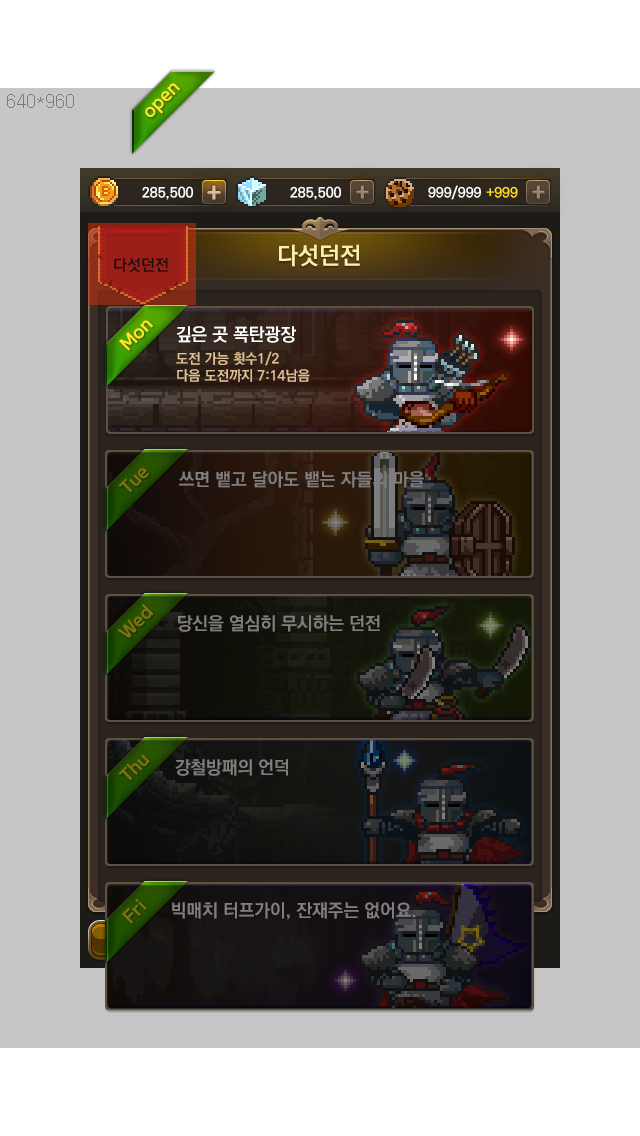
<style>
.page{position:relative;width:640px;height:1136px;background:#c6c6c6}
.page>*{position:absolute;margin:0}
.t1{font:18px "GodoM";letter-spacing:0.025em;color:#ffe326}
.t2{font:24px "KoPubDotumBold";color:#ffedab}
.t3{font:16px "KoPubDotumBold";color:#1b0e0f}
.t4{font:18px "KoPubDotumBold";color:#ffffff}
.t5{font:14px "KoPubDotumBold";color:#e1c093}
.t6{font:18px "GodoM";letter-spacing:0.025em;color:#7f7113}
.t7{font:18px "KoPubDotumBold";color:#7f7f7f}
</style>
<div class="page">
<p class="t1" style="left:145px;top:83px;width:35px;height:34px;rotate:-45deg">open</p>
<p class="t2" style="left:279px;top:244px;width:81px;height:23px">다섯던전</p>
<p class="t3" style="left:114px;top:257px;width:54px;height:16px">다섯던전</p>
<p class="t1" style="left:119px;top:320px;width:34px;height:31px;rotate:-45deg">Mon</p>
<p class="t4" style="left:176px;top:326px;width:120px;height:17px">깊은 곳 폭탄광장</p>
<p class="t5" style="left:176px;top:351px;width:134px;height:31px">도전 가능 횟수1/2<br>다음 도전까지 7:14남음</p>
<p class="t6" style="left:118px;top:468px;width:31px;height:24px;rotate:-45deg">Tue</p>
<p class="t7" style="left:179px;top:471px;width:245px;height:17px">쓰면 뱉고 달아도 뱉는 자들의 마을</p>
<p class="t6" style="left:117px;top:604px;width:37px;height:34px;rotate:-45deg">Wed</p>
<p class="t7" style="left:178px;top:615px;width:202px;height:17px">당신을 열심히 무시하는 던전</p>
<p class="t6" style="left:118px;top:754px;width:32px;height:26px;rotate:-45deg">Thu</p>
<p class="t7" style="left:175px;top:759px;width:113px;height:17px">강철방패의 언덕</p>
<p class="t7" style="left:172px;top:902px;width:244px;height:18px">빅매치 터프가이, 잔재주는 없어요.</p>
</div>
